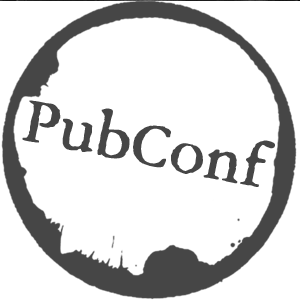
<style>
.page{position:relative;width:300px;height:300px;background:#ffffff}
.page>*{position:absolute;margin:0}
.t1{font:57.9px "Aquifer";color:#464646;font-weight:bold}
</style>
<div class="page">
<p class="t1" style="left:22px;top:99px;width:253px;height:87px;rotate:11deg">PubConf</p>
</div>
